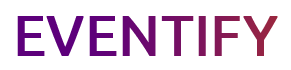
<style>
.page{position:relative;width:291px;height:70px;background:#ffffff}
.page>*{position:absolute;margin:0}
.t1{font:56px "Ubuntu-Regular";color:#5d007b;font-weight:bold}
</style>
<div class="page">
<p class="t1" style="left:17px;top:16px;width:261px;height:40px">EVENTIFY</p>
</div>
